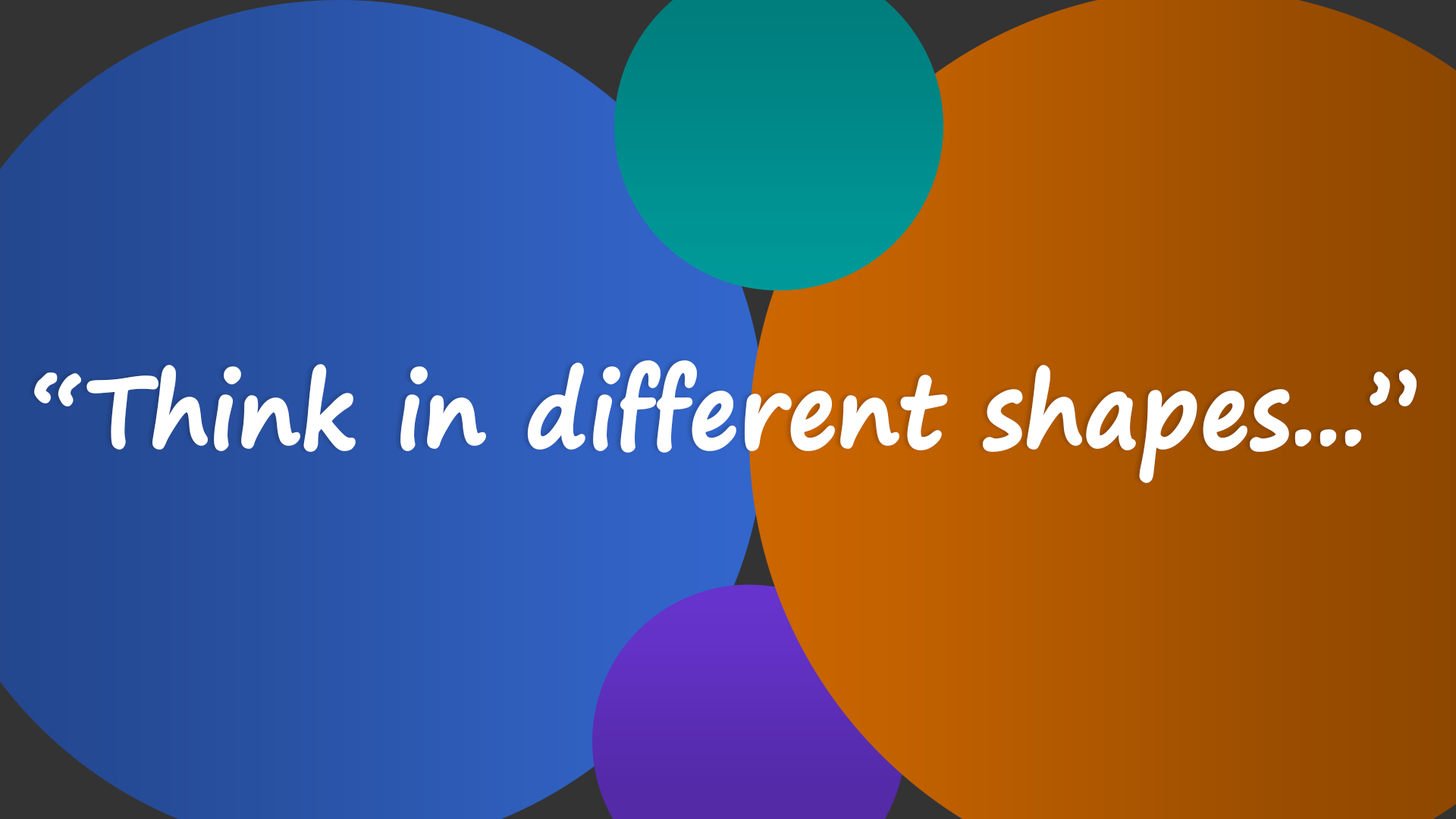
<style>
.page{position:relative;width:1456px;height:819px}
.page>*{position:absolute;margin:0}
.t1{font:100.1px "SegoePrint-Bold";color:#ffffff;font-weight:bold;scale:0.91 1}
</style>
<div class="page">
<p class="t1" style="left:34px;top:360px;width:1383px;height:123px">“Think in different shapes...”</p>
</div>
